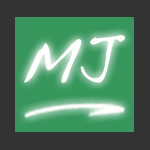
<style>
.page{position:relative;width:150px;height:150px;background:#333333}
.page>*{position:absolute;margin:0}
.t1{font:63.6px "Handwriting-Dakota";color:#ffffff}
</style>
<div class="page">
<p class="t1" style="left:24px;top:35px;width:101px;height:48px">MJ</p>
</div>
